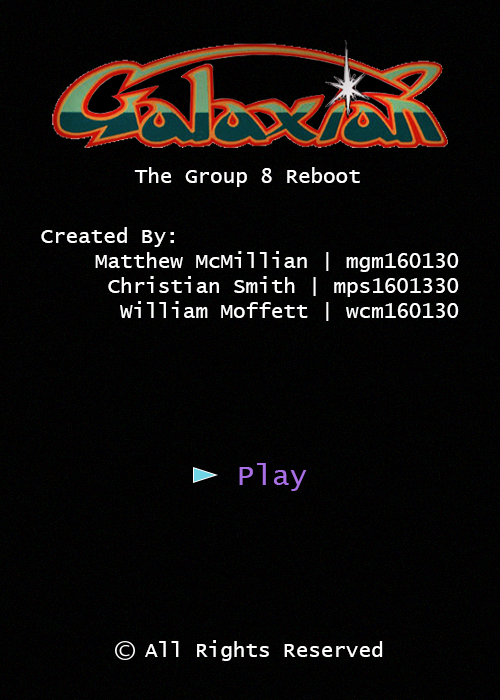
<style>
.page{position:relative;width:500px;height:700px}
.page>*{position:absolute;margin:0}
.t1{font:20.8px "LucidaConsole";color:#ffffff}
.t2{font:29.2px "LucidaConsole";color:#a96fe4}
</style>
<div class="page">
<p class="t1" style="left:134px;top:167px;width:226px;height:20px">The Group 8 Reboot</p>
<p class="t1" style="left:41px;top:227px;width:418px;height:94px">Created By:<br>Matthew McMillian | mgm160130<br>Christian Smith | mps1601330<br>William Moffett | wcm160130</p>
<p class="t2" style="left:239px;top:463px;width:68px;height:28px">Play!</p>
<p class="t1" style="left:145px;top:640px;width:238px;height:21px">All Rights Reserved</p>
</div>
